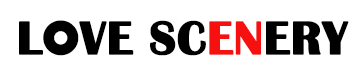
<style>
.page{position:relative;width:364px;height:73px;background:#ffffff}
.page>*{position:absolute;margin:0}
.t1{font:48px "BritannicBold";color:#000000;font-weight:bold}
.t2{font:48px "STHupo";color:#000000;font-weight:bold}
.t3{font:48px "BritannicBold";color:#f71010;font-weight:bold}
</style>
<div class="page">
<p class="t1" style="left:19px;top:20px;width:330px;height:36px">L<span class="t2">O</span>VE SC<span class="t3">EN</span>ERY</p>
</div>
